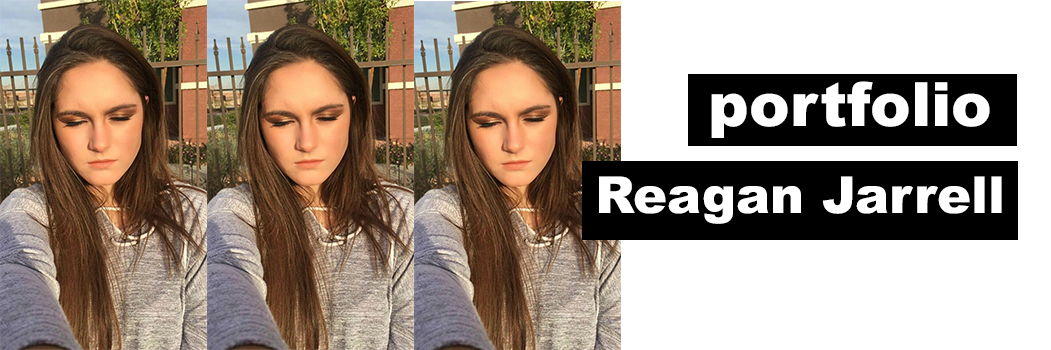
<style>
.page{position:relative;width:1051px;height:350px;background:#ffffff}
.page>*{position:absolute;margin:0}
.t1{font:61px "Arial-Black";color:#ffffff}
.t2{font:51px "Arial-Black";color:#ffffff}
</style>
<div class="page">
<p class="t1" style="left:711px;top:81px;width:279px;height:57px">portfolio</p>
<p class="t2" style="left:599px;top:176px;width:403px;height:48px">Reagan Jarrell</p>
</div>
